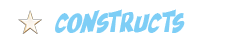
<style>
.page{position:relative;width:250px;height:45px;background:#ffffff}
.page>*{position:absolute;margin:0}
.t1{font:30px "HoustonComicsPersonalUse";color:#7ecef6}
</style>
<div class="page">
<p class="t1" style="left:55px;top:9px;width:130px;height:24px">CONSTRUCTS</p>
</div>
